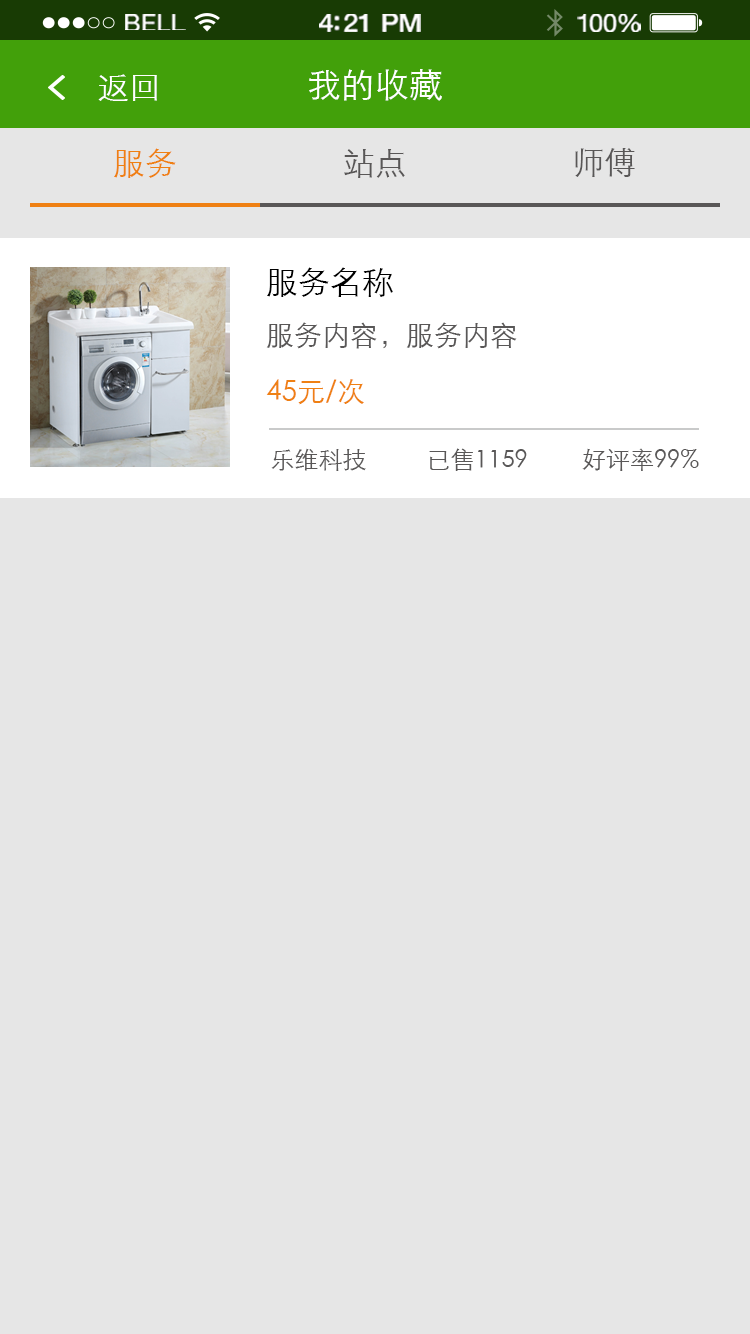
<style>
.page{position:relative;width:750px;height:1334px;background:#e6e6e6}
.page>*{position:absolute;margin:0}
.t1{font:23.3px "HelveticaNeue";letter-spacing:0.02em;color:#ffffff;scale:1.06 1}
.t2{font:25.3px "HelveticaNeue-Medium";letter-spacing:-0.02em;color:#ffffff;scale:1.06 1}
.t3{font:24.3px "HelveticaNeue";letter-spacing:-0.02em;color:#ffffff;scale:1.06 1}
.t4{font:32px "STXihei";color:#ffffff}
.t5{font:34px "STXihei";color:#ffffff}
.t6{font:32px "STXihei";color:#ef8013}
.t7{font:32px "STXihei";color:#595757}
.t8{font:28px/56px "STXihei";color:#595757}
.t9{font:32px/56px "STXihei";color:#000000}
.t10{font:28px/56px "STXihei";color:#ef8013}
.t11{font:24px "STXihei";color:#595757}
</style>
<div class="page">
<p class="t1" style="left:125px;top:14px;width:61px;height:16px">BELL</p>
<p class="t2" style="left:319px;top:14px;width:102px;height:18px">4:21 PM</p>
<p class="t3" style="left:577px;top:14px;width:64px;height:18px">100%</p>
<p class="t4" style="left:98px;top:74px;width:59px;height:27px">返回</p>
<p class="t5" style="left:309px;top:69px;width:133px;height:32px">我的收藏</p>
<p class="t6" style="left:114px;top:148px;width:62px;height:30px">服务</p>
<p class="t7" style="left:344px;top:149px;width:61px;height:29px">站点</p>
<p class="t7" style="left:575px;top:148px;width:60px;height:29px">师傅</p>
<p class="t8" style="left:266px;top:267px;width:251px;height:138px"><span class="t9">服务名称<br></span>服务内容，服务内容<br><span class="t10">45元/次</span></p>
<p class="t11" style="left:271px;top:448px;width:428px;height:23px">乐维科技          已售1159         好评率99%</p>
</div>
